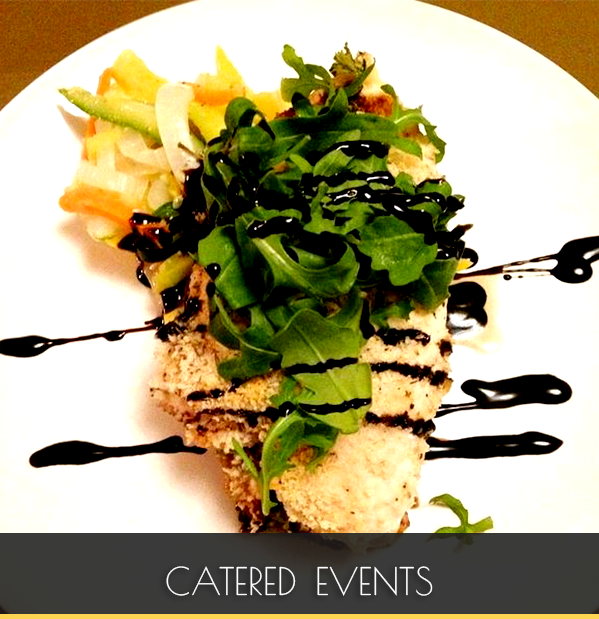
<style>
.page{position:relative;width:599px;height:619px;background:#ffffff}
.page>*{position:absolute;margin:0}
.t1{font:53.3px "PoiretOne-Regular";color:#ffffff;font-variant:small-caps}
</style>
<div class="page">
<p class="t1" style="left:166px;top:566px;width:267px;height:30px">catered events</p>
</div>
